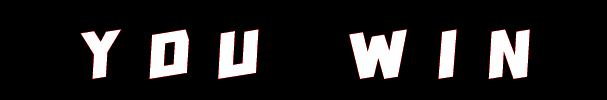
<style>
.page{position:relative;width:607px;height:100px;background:#000000}
.page>*{position:absolute;margin:0}
.t1{font:70.8px "HGGHT";letter-spacing:0.36em;color:#ffffff}
</style>
<div class="page">
<p class="t1" style="left:80px;top:29px;width:450px;height:50px">YOU WIN</p>
</div>
